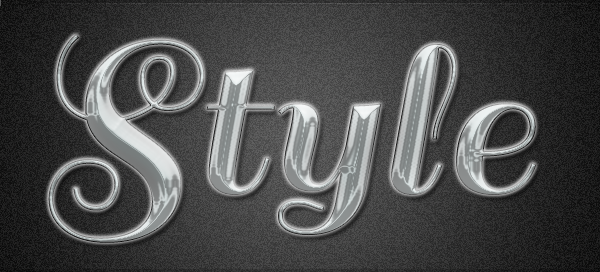
<style>
.page{position:relative;width:600px;height:272px}
.page>*{position:absolute;margin:0}
.t1{font:230px "Sail-Regular"}
</style>
<div class="page">
<p class="t1" style="left:48px;top:34px;width:488px;height:209px">Style</p>
</div>
